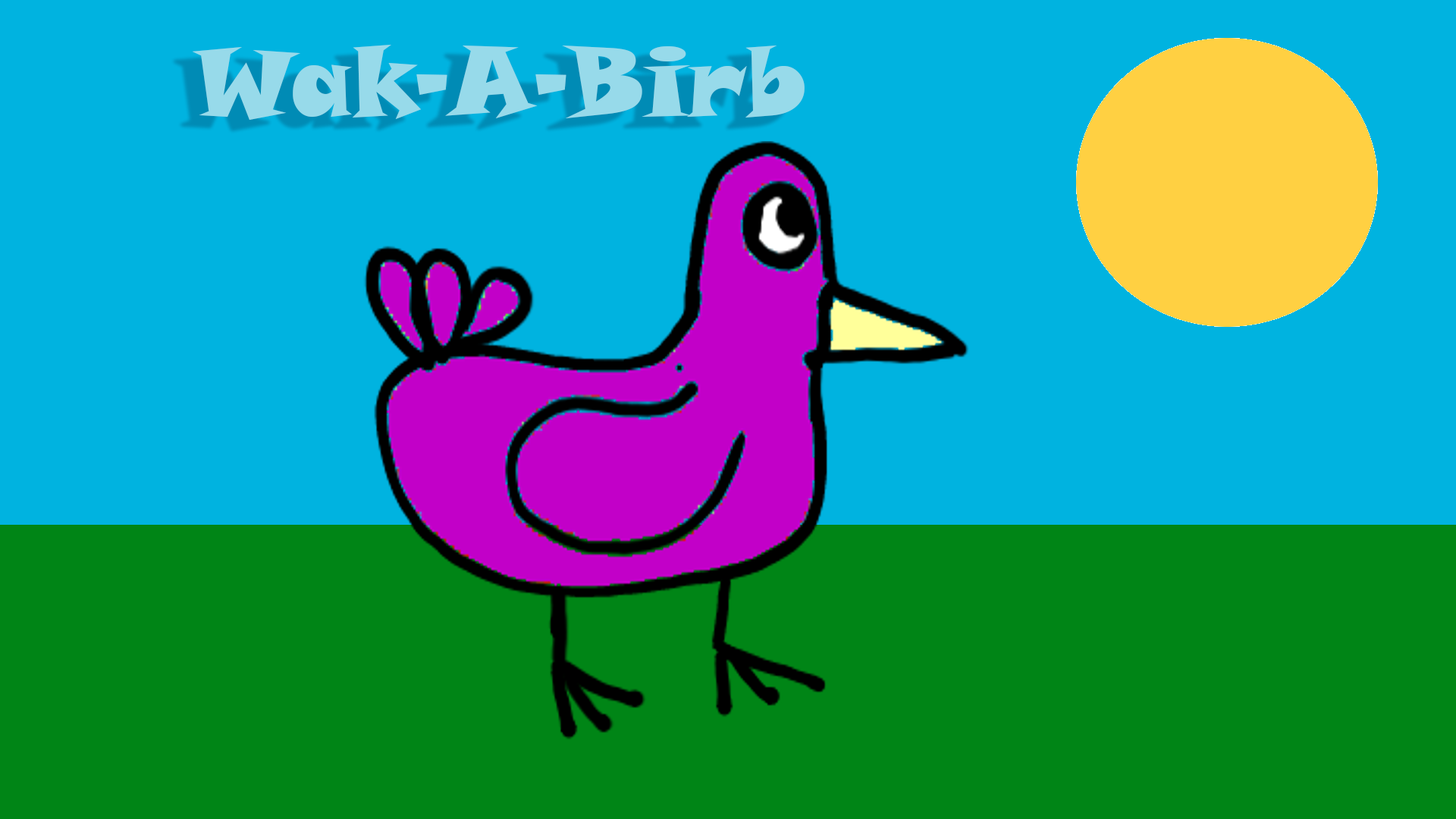
<style>
.page{position:relative;width:1456px;height:819px;background:#00b3e0}
.page>*{position:absolute;margin:0}
.t1{font:97.1px "SnapITC-Regular";color:#97daea}
</style>
<div class="page">
<p class="t1" style="left:192px;top:45px;width:613px;height:75px">Wak-A-Birb</p>
</div>
